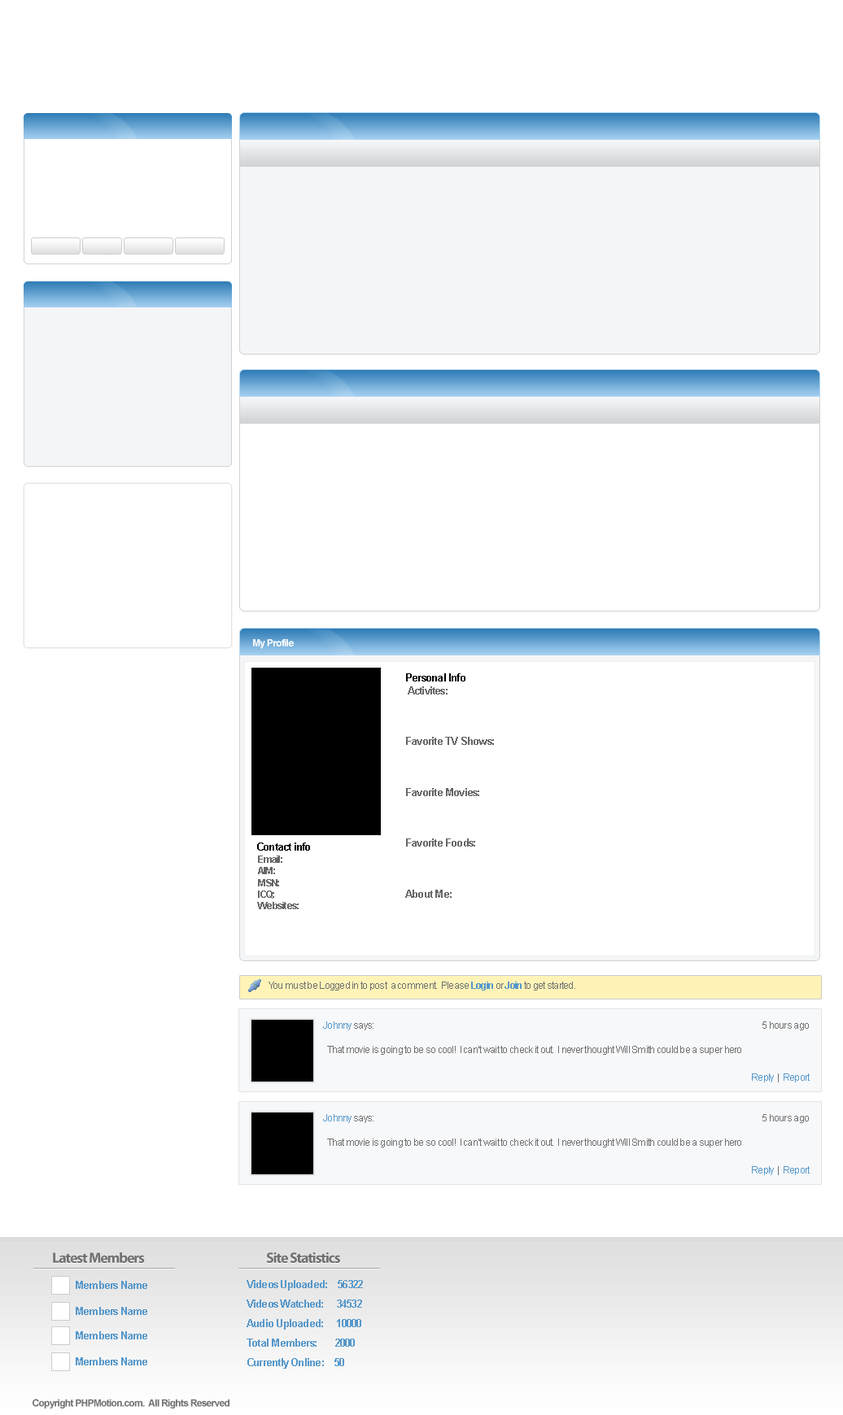
<style>
.page{position:relative;width:843px;height:1415px;background:#ffffff}
.page>*{position:absolute;margin:0}
.t1{font:9.8px "Helvetica-Bold";letter-spacing:-0.06em;color:#ffffff}
.t2{font:10.6px "Arial-BoldMT";letter-spacing:-0.06em;color:#666666}
.t3{font:10.6px "Arial-BoldMT";letter-spacing:-0.06em;color:#000000}
.t4{font:9.8px "Arial-BoldMT";letter-spacing:-0.06em;color:#666666}
.t5{font:9.8px "ArialMT";letter-spacing:-0.06em;color:#717171}
.t6{font:9.8px "Arial-BoldMT";letter-spacing:-0.06em;color:#5798ca}
.t7{font:9.8px "ArialMT";letter-spacing:-0.06em;color:#5798ca}
.t8{font:14.6px "MyriadPro-Bold";letter-spacing:-0.06em;color:#717171}
.t9{font:14.6px "MyriadPro-Bold";letter-spacing:-0.06em}
.t10{font:10.6px "Arial-BoldMT";letter-spacing:-0.06em;color:#5798ca}
.t11{font:10.6px/19.5px "Arial-BoldMT";letter-spacing:-0.06em;color:#5798ca}
.t12{font:9.8px "Arial-BoldMT";letter-spacing:-0.06em;color:#717171}
</style>
<div class="page">
<p class="t1" style="left:253px;top:639px;width:41px;height:10px">My Profile</p>
<p class="t2" style="left:405px;top:673px;width:89px;height:225px"><span class="t3">Personal Info<br> </span>Activites:<br><br><br><br>Favorite TV Shows:<br><br><br><br>Favorite Movies:<br><br><br><br>Favorite Foods:<br><br><br><br>About Me:</p>
<p class="t4" style="left:257px;top:843px;width:53px;height:66px"><span class="t3">Contact info<br></span> Email:<br> AIM:<br> MSN:<br> ICQ:<br> Websites:</p>
<p class="t5" style="left:268px;top:982px;width:307px;height:9px">You must be Logged in to post  a comment.  Please <span class="t6">Login</span> or <span class="t6">Join</span> to get started.</p>
<p class="t7" style="left:323px;top:1022px;width:50px;height:8px">Johnny<span class="t5"> says:</span></p>
<p class="t5" style="left:762px;top:1022px;width:46px;height:8px">5 hours ago</p>
<p class="t5" style="left:327px;top:1046px;width:414px;height:9px">That movie is going to be so cool!  I can’t wait to check it out.  I never thought Will Smith could be a super hero</p>
<p class="t7" style="left:752px;top:1074px;width:57px;height:9px">Reply<span class="t5">  |  </span>Report</p>
<p class="t7" style="left:323px;top:1114px;width:50px;height:9px">Johnny<span class="t5"> says:</span></p>
<p class="t5" style="left:762px;top:1114px;width:46px;height:9px">5 hours ago</p>
<p class="t5" style="left:327px;top:1139px;width:414px;height:9px">That movie is going to be so cool!  I can’t wait to check it out.  I never thought Will Smith could be a super hero</p>
<p class="t7" style="left:752px;top:1166px;width:57px;height:9px">Reply<span class="t5">  |  </span>Report</p>
<p class="t8" style="left:53px;top:1253px;width:92px;height:11px">Latest Members</p>
<p class="t8" style="left:53px;top:1253px;width:92px;height:10px">Latest Members</p>
<p class="t9" style="left:266px;top:1253px;width:74px;height:11px">Site Statistics</p>
<p class="t8" style="left:266px;top:1253px;width:74px;height:10px">Site Statistics</p>
<p class="t10" style="left:76px;top:1281px;width:71px;height:8px">Members Name</p>
<p class="t11" style="left:246px;top:1280px;width:117px;height:89px">Videos Uploaded:    56322<br>Videos Watched:     34532<br>Audio Uploaded:     10000<br>Total Members:       2000<br>Currently Online:    50</p>
<p class="t10" style="left:76px;top:1307px;width:71px;height:8px">Members Name</p>
<p class="t10" style="left:76px;top:1331px;width:71px;height:9px">Members Name</p>
<p class="t10" style="left:76px;top:1357px;width:71px;height:9px">Members Name</p>
<p class="t12" style="left:33px;top:1399px;width:196px;height:10px">Copyright PHPMotion.com.  All Rights Reserved</p>
</div>
